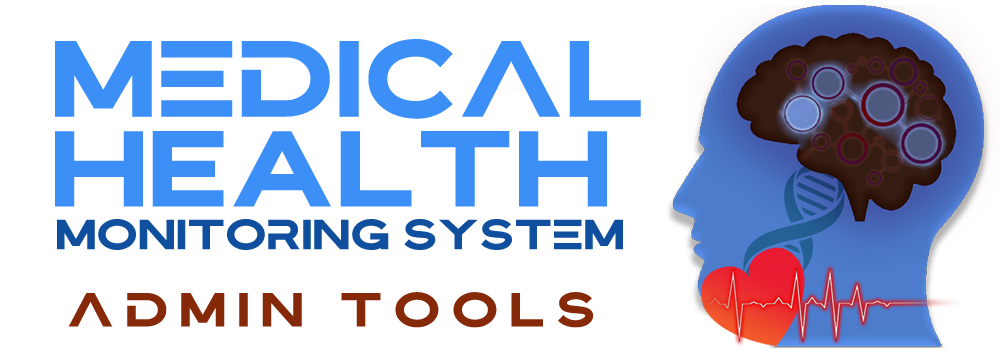
<style>
.page{position:relative;width:1000px;height:350px;background:#ffffff}
.page>*{position:absolute;margin:0}
.t1{font:95px "Bristone";color:#3c8ff6;scale:1.05 1}
.t2{font:36.9px "Bristone";color:#0f4f9d;scale:1.05 1}
.t3{font:42.2px "Bristone";letter-spacing:0.24em;color:#862908;scale:1.05 1}
</style>
<div class="page">
<p class="t1" style="left:55px;top:39px;width:586px;height:80px">medical</p>
<p class="t1" style="left:55px;top:131px;width:552px;height:76px">HEALTH</p>
<p class="t2" style="left:57px;top:219px;width:566px;height:31px">monitoring system</p>
<p class="t3" style="left:68px;top:292px;width:526px;height:36px">admin tools</p>
</div>
